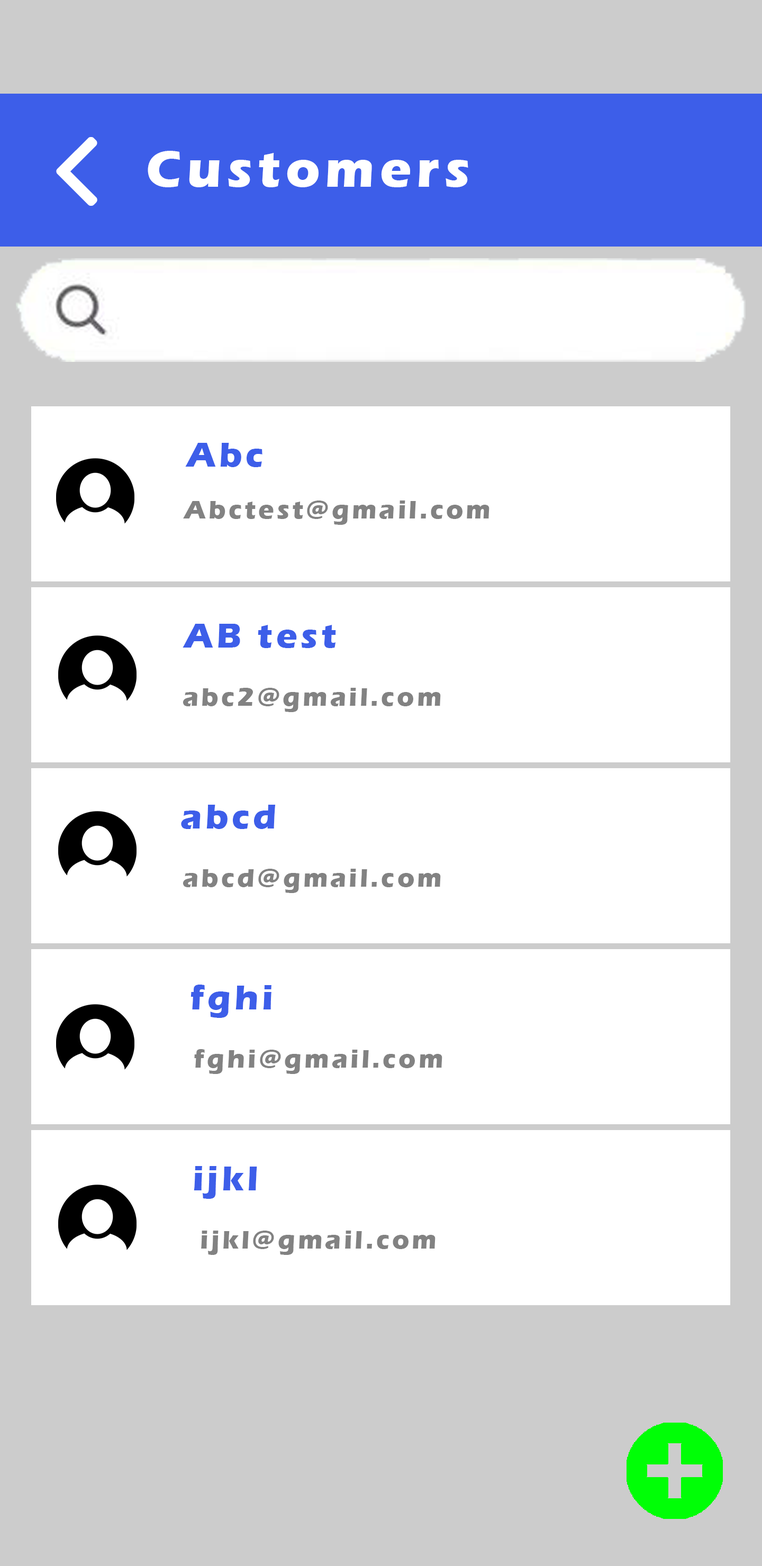
<style>
.page{position:relative;width:762px;height:1566px;background:#ffffff}
.page>*{position:absolute;margin:0}
.t1{font:52.9px "ErasITC-Bold";letter-spacing:0.1em;color:#ffffff}
.t2{font:35.3px "ErasITC-Bold";letter-spacing:0.1em;color:#3d5ee9}
.t3{font:26.4px "ErasITC-Bold";letter-spacing:0.1em;color:#828282}
</style>
<div class="page">
<p class="t1" style="left:148px;top:151px;width:320px;height:36px">Customers</p>
<p class="t2" style="left:185px;top:443px;width:77px;height:24px">Abc</p>
<p class="t3" style="left:183px;top:500px;width:306px;height:25px">Abctest@gmail.com</p>
<p class="t2" style="left:182px;top:624px;width:154px;height:24px">AB test</p>
<p class="t3" style="left:182px;top:688px;width:259px;height:24px">abc2@gmail.com</p>
<p class="t2" style="left:181px;top:804px;width:95px;height:25px">abcd</p>
<p class="t3" style="left:182px;top:868px;width:259px;height:25px">abcd@gmail.com</p>
<p class="t2" style="left:190px;top:984px;width:81px;height:34px">fghi</p>
<p class="t3" style="left:194px;top:1049px;width:248px;height:25px">fghi@gmail.com</p>
<p class="t2" style="left:194px;top:1166px;width:63px;height:33px">ijkl</p>
<p class="t3" style="left:201px;top:1230px;width:234px;height:25px">ijkl@gmail.com</p>
</div>
